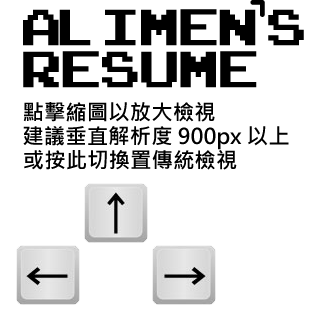
<style>
.page{position:relative;width:320px;height:320px;background:#ffffff}
.page>*{position:absolute;margin:0}
.t1{font:57.2px "DataControl";color:#000000}
.t2{font:71.5px "ArcadeClassic";color:#000000}
.t3{font:21.5px "MicrosoftJhengHeiBold";color:#000000}
</style>
<div class="page">
<p class="t1" style="left:250px;top:0px;width:15px;height:17px">,</p>
<p class="t2" style="left:23px;top:9px;width:281px;height:37px">Alimen s</p>
<p class="t2" style="left:23px;top:51px;width:234px;height:37px">Resume</p>
<p class="t3" style="left:23px;top:102px;width:192px;height:20px">點擊縮圖以放大檢視</p>
<p class="t3" style="left:23px;top:126px;width:266px;height:24px">建議垂直解析度 900px 以上</p>
<p class="t3" style="left:24px;top:150px;width:213px;height:20px">或按此切換置傳統檢視</p>
</div>
